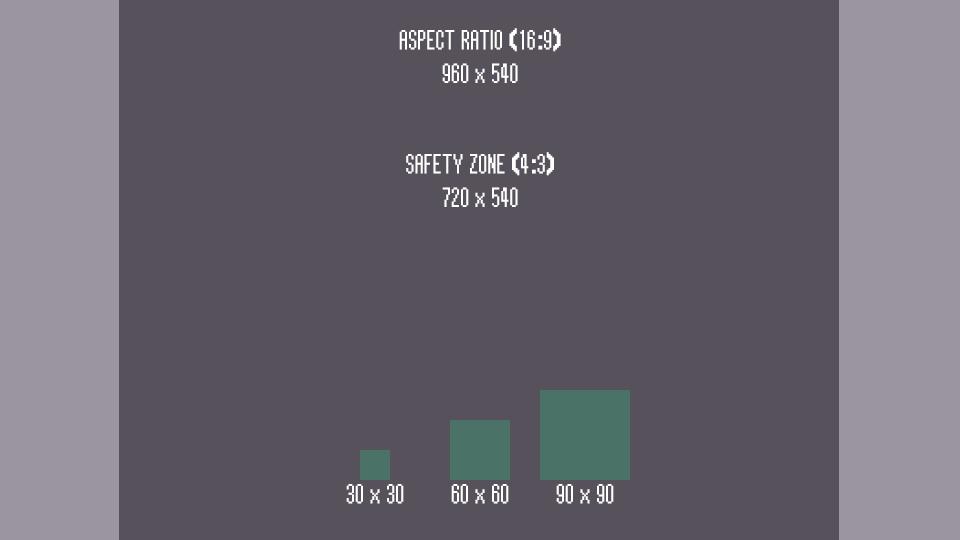
<style>
.page{position:relative;width:960px;height:540px;background:#56515b}
.page>*{position:absolute;margin:0}
.t1{font:28px "ReturnOfGanonReg";letter-spacing:-0.05em;color:#ffffff}
</style>
<div class="page">
<p class="t1" style="left:399px;top:28px;width:162px;height:55px;text-align:center">ASPECT RATIO (16:9)<br>960 x 540</p>
<p class="t1" style="left:406px;top:152px;width:148px;height:55px;text-align:center">SAFETY ZONE (4:3)<br>720 x 540</p>
<p class="t1" style="left:346px;top:484px;width:58px;height:20px">30 x 30</p>
<p class="t1" style="left:451px;top:484px;width:58px;height:20px">60 x 60</p>
<p class="t1" style="left:556px;top:484px;width:58px;height:20px">90 x 90</p>
</div>
